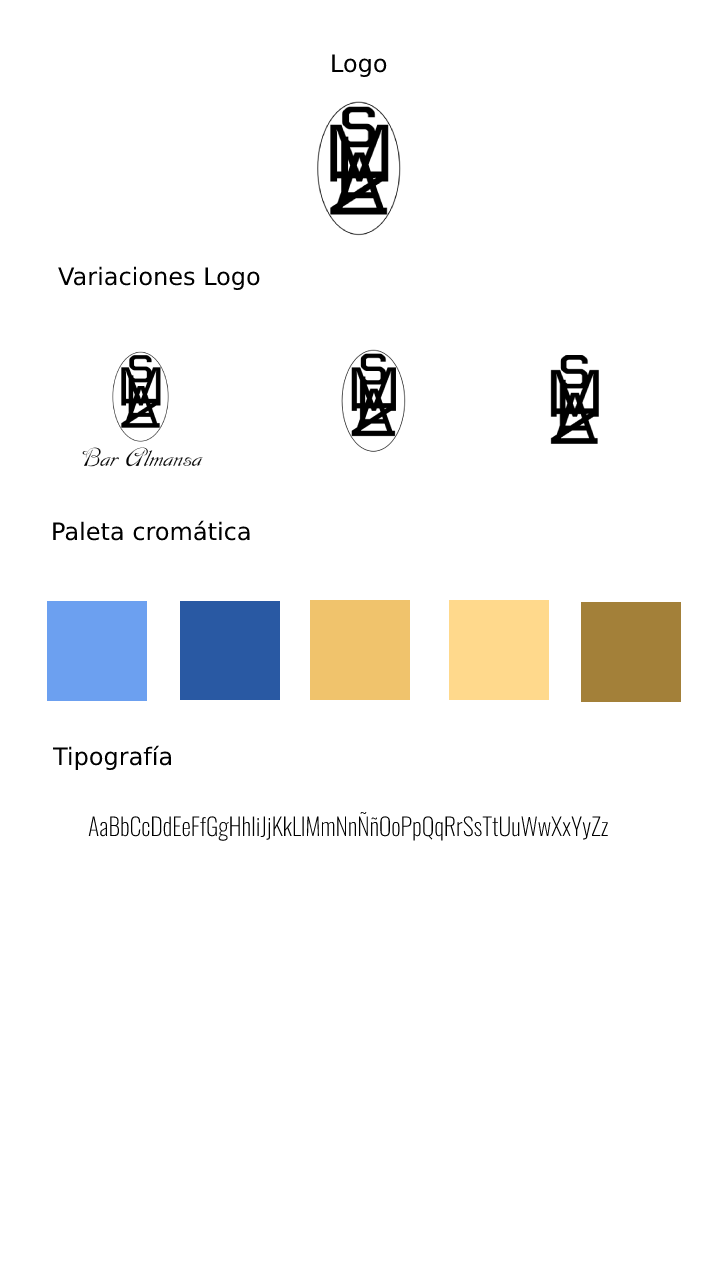
<style>
.page{position:relative;width:720px;height:1280px;background:#ffffff}
.page>*{position:absolute;margin:0}
.t1{font:24px "DejaVuSans";color:#000000}
.t2{font:24px "Oswald-ExtraLight";color:#000000}
</style>
<div class="page">
<p class="t1" style="left:332px;top:54px;width:55px;height:23px">Logo</p>
<p class="t1" style="left:53px;top:520px;width:197px;height:21px">Paleta cromática</p>
<p class="t1" style="left:52px;top:745px;width:119px;height:25px">Tipografía</p>
<p class="t2" style="left:88px;top:811px;width:520px;height:30px">AaBbCcDdEeFfGgHhIiJjKkLlMmNnÑñOoPpQqRrSsTtUuWwXxYyZz</p>
</div>
